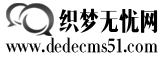
<style>
.page{position:relative;width:162px;height:59px;background:#ffffff}
.page>*{position:absolute;margin:0}
.t1{font:24px "MFLangSong_Noncommercial-Regular";color:#000000}
.t2{font:20px "MFLangSong_Noncommercial-Regular";color:#000000}
</style>
<div class="page">
<p class="t1" style="left:59px;top:8px;width:99px;height:25px">织梦无忧网</p>
<p class="t2" style="left:5px;top:37px;width:153px;height:16px">www.dedecms51.com</p>
</div>
